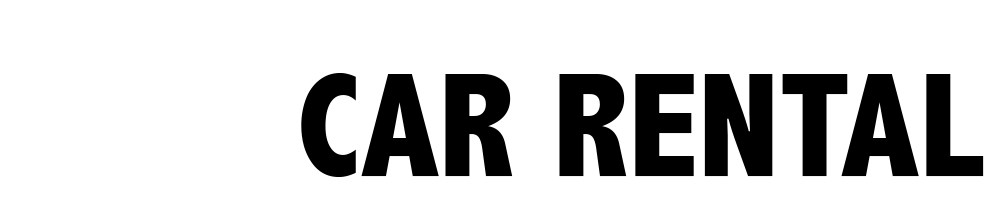
<style>
.page{position:relative;width:998px;height:213px;background:#ffffff}
.page>*{position:absolute;margin:0}
.t1{font:150px "AbadiMT-CondensedExtraBold";color:#000000}
</style>
<div class="page">
<p class="t1" style="left:301px;top:73px;width:683px;height:104px">CAR RENTAL</p>
</div>
